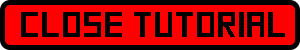
<style>
.page{position:relative;width:300px;height:50px;background:#ff0000}
.page>*{position:absolute;margin:0}
.t1{font:36px "SquareFont";color:#000000}
</style>
<div class="page">
<p class="t1" style="left:21px;top:12px;width:264px;height:25px">CLOSE TUTORIAL</p>
</div>
